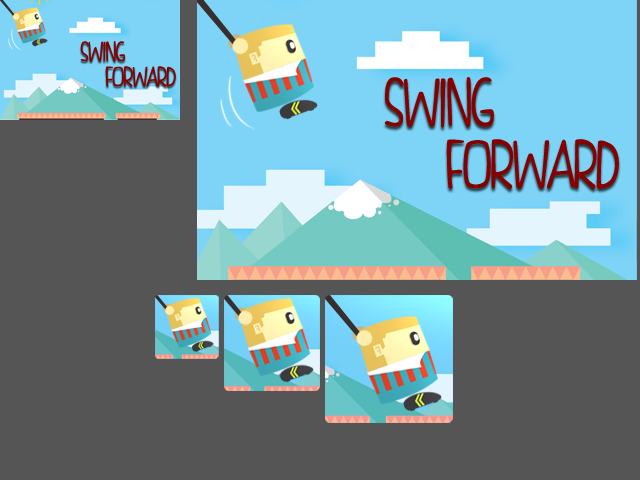
<style>
.page{position:relative;width:640px;height:480px;background:#555555}
.page>*{position:absolute;margin:0}
.t1{font:29.3px "FISHfingers";letter-spacing:-0.025em;color:#870000}
.t2{font:72.4px "FISHfingers";letter-spacing:-0.025em;color:#870000}
</style>
<div class="page">
<p class="t1" style="left:80px;top:41px;width:45px;height:21px">SWING</p>
<p class="t1" style="left:105px;top:66px;width:71px;height:21px">FORWARD</p>
<p class="t2" style="left:384px;top:77px;width:110px;height:51px">SWING</p>
<p class="t2" style="left:446px;top:139px;width:173px;height:50px">FORWARD</p>
</div>
